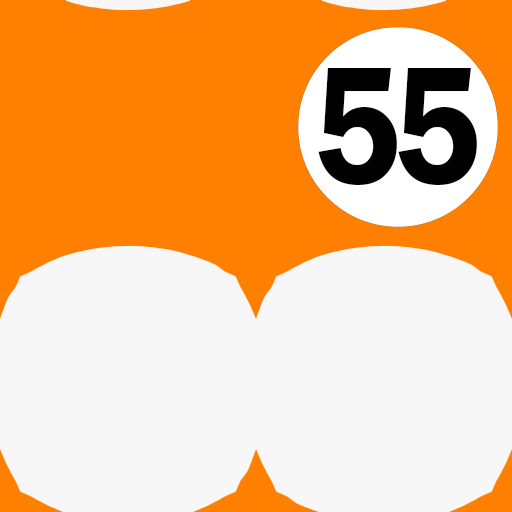
<style>
.page{position:relative;width:512px;height:512px;background:#f7f7f7}
.page>*{position:absolute;margin:0}
.t1{font:172.5px "FranklinGothic-Demi";letter-spacing:-0.05em;color:#010101;scale:0.87 1}
</style>
<div class="page">
<p class="t1" style="left:318px;top:68px;width:159px;height:117px">55</p>
</div>
